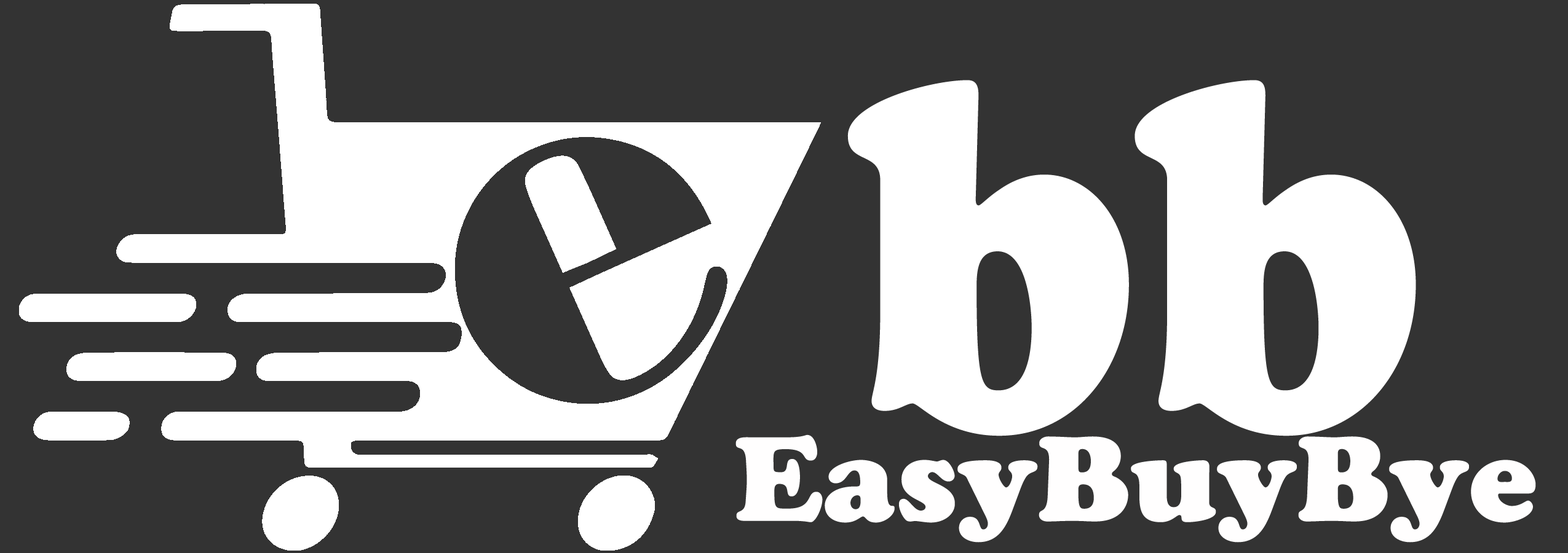
<style>
.page{position:relative;width:1568px;height:553px;background:#333333}
.page>*{position:absolute;margin:0}
.t1{font:497.5px "CooperBlackStd";color:#ffffff;scale:0.87 1}
.t2{font:119.1px "CooperBlackStd";color:#fffefe}
</style>
<div class="page">
<p class="t1" style="left:847px;top:80px;width:569px;height:357px">bb</p>
<p class="t2" style="left:735px;top:435px;width:801px;height:108px">EasyBuyBye</p>
</div>
